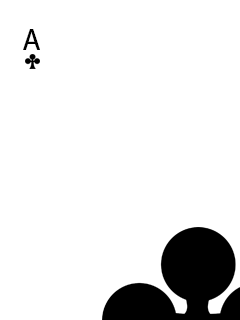
<style>
.page{position:relative;width:240px;height:320px;background:#ffffff}
.page>*{position:absolute;margin:0}
.t1{font:30px "MyriadHebrew-Regular";color:#010101}
</style>
<div class="page">
<p class="t1" style="left:23px;top:29px;width:17px;height:21px">A</p>
</div>
